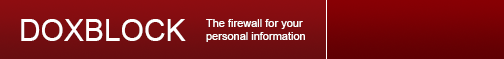
<style>
.page{position:relative;width:504px;height:59px}
.page>*{position:absolute;margin:0}
.t1{font:30px "ArialMT";color:#ffffff}
.t2{font:11px "ArialMT";color:#ffffff}
</style>
<div class="page">
<p class="t1" style="left:21px;top:19px;width:165px;height:22px">DOXBLOCK</p>
<p class="t2" style="left:206px;top:19px;width:99px;height:23px">The firewall for your<br>personal information</p>
</div>
